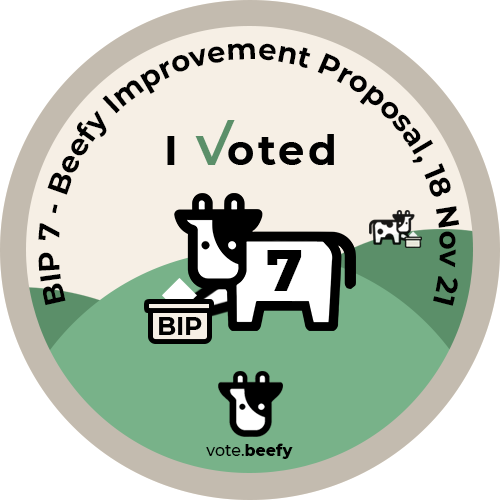
<style>
.page{position:relative;width:500px;height:500px;background:#f6efe5}
.page>*{position:absolute;margin:0}
.t1{font:29.2px "Montserrat-Bold";color:#000000}
.t2{font:58.3px "Montserrat-ExtraBold";color:#000000}
.t3{font:15.8px "Montserrat-Medium";color:#000000}
.t4{font:15.8px "Montserrat-ExtraBold";color:#000000}
</style>
<div class="page">
<p class="t1" style="left:38px;top:43px;width:422px;height:263px;text-align:center">BIP 7 - Beefy Improvement Proposal, 18 Nov 21</p>
<p class="t2" style="left:267px;top:250px;width:35px;height:41px">7</p>
<p class="t3" style="left:206px;top:443px;width:87px;height:16px">vote.<span class="t4">beefy</span></p>
</div>
